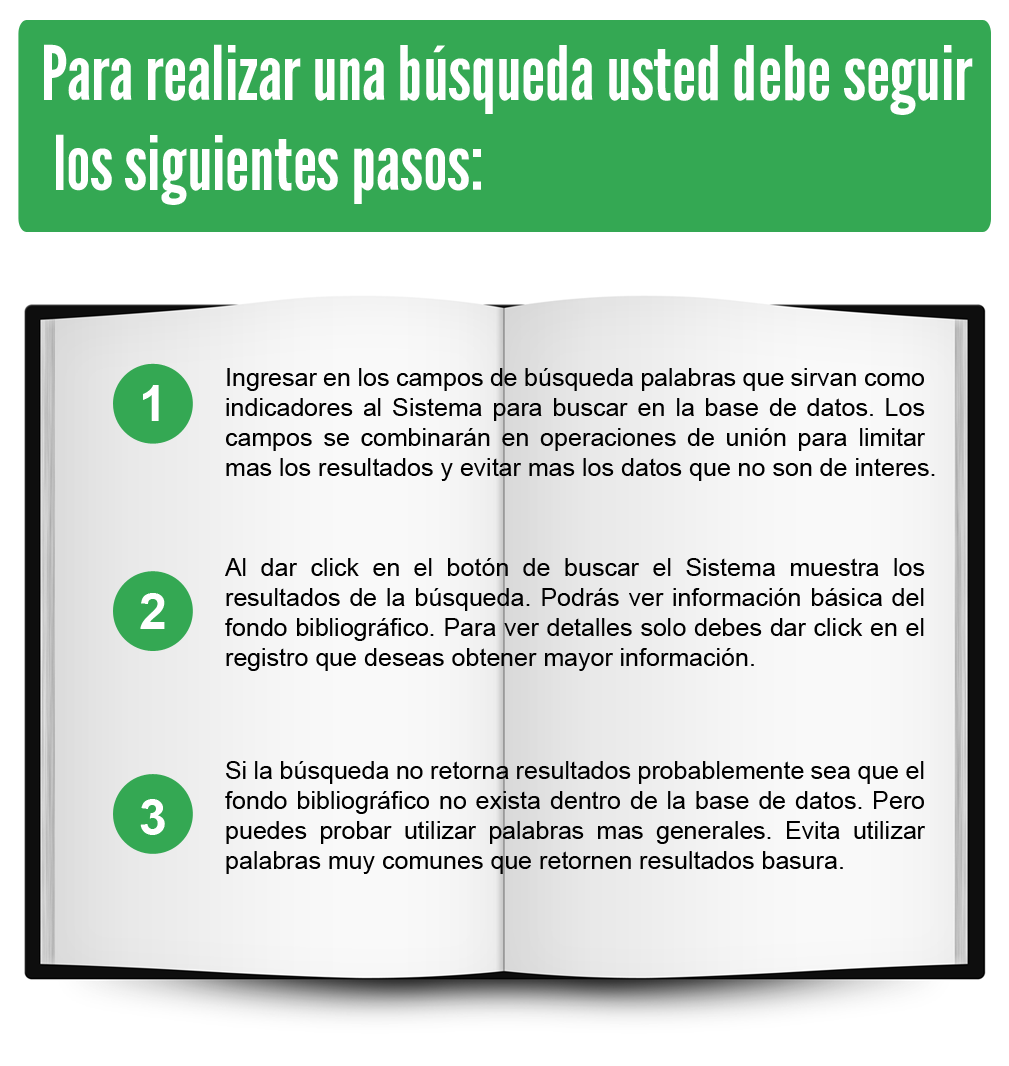
<style>
.page{position:relative;width:1009px;height:1066px}
.page>*{position:absolute;margin:0}
.t1{font:75px "LeagueGothic-Regular";color:#ffffff}
.t2{font:25px "ArialMT";color:#000000}
.t3{font:50px "Arial-BoldMT";color:#ffffff}
</style>
<div class="page">
<p class="t1" style="left:44px;top:44px;width:929px;height:161px">Para realizar una búsqueda usted debe seguir<br> los siguientes pasos:</p>
<p class="t2" style="left:226px;top:368px;width:709px;height:113px;text-align:justify">Ingresar en los campos de búsqueda palabras que sirvan como indicadores al Sistema para buscar en la base de datos. Los campos se combinarán en operaciones de unión para limitar mas los resultados y evitar mas los datos que no son de interes.</p>
<p class="t3" style="left:143px;top:385px;width:16px;height:36px">1</p>
<p class="t2" style="left:225px;top:558px;width:700px;height:113px;text-align:justify">Al dar click en el botón de buscar el Sistema muestra los resultados de la búsqueda. Podrás ver información básica del fondo bibliográfico. Para ver detalles solo debes dar click en el registro que deseas obtener mayor información.</p>
<p class="t3" style="left:140px;top:593px;width:25px;height:36px">2</p>
<p class="t2" style="left:225px;top:761px;width:700px;height:113px;text-align:justify">Si la búsqueda no retorna resultados probablemente sea que el fondo bibliográfico no exista dentro de la base de datos. Pero puedes probar utilizar palabras mas generales. Evita utilizar palabras muy comunes que retornen resultados basura.</p>
<p class="t3" style="left:140px;top:799px;width:25px;height:36px">3</p>
</div>
